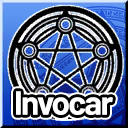
<style>
.page{position:relative;width:128px;height:128px;background:#000000}
.page>*{position:absolute;margin:0}
.t1{font:33.3px "Barlow-Bold";letter-spacing:-0.05em;color:#ffffff}
</style>
<div class="page">
<p class="t1" style="left:16px;top:91px;width:97px;height:24px">Invocar</p>
</div>
